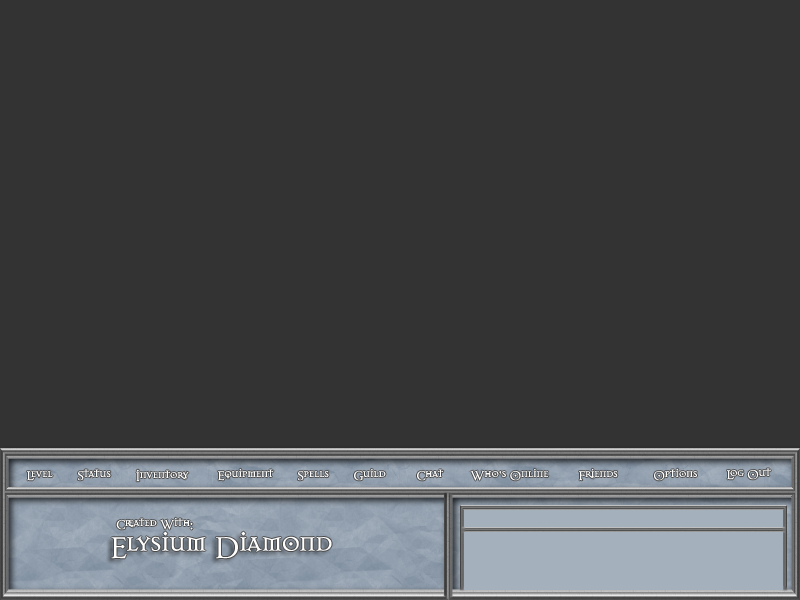
<style>
.page{position:relative;width:800px;height:600px;background:#333333}
.page>*{position:absolute;margin:0}
.t1{font:14px "Dark11";color:#ffffff}
.t2{font:33.2px "Dark11";color:#ffffff}
</style>
<div class="page">
<p class="t1" style="left:27px;top:470px;width:26px;height:11px">Level</p>
<p class="t1" style="left:78px;top:469px;width:33px;height:12px">Status</p>
<p class="t1" style="left:136px;top:469px;width:53px;height:13px">Inventory</p>
<p class="t1" style="left:218px;top:468px;width:56px;height:13px">Equipment</p>
<p class="t1" style="left:298px;top:471px;width:31px;height:10px">Spells</p>
<p class="t1" style="left:354px;top:468px;width:32px;height:13px">Guild</p>
<p class="t1" style="left:417px;top:469px;width:27px;height:12px">Chat</p>
<p class="t1" style="left:470px;top:468px;width:79px;height:13px">Who’s Online</p>
<p class="t1" style="left:579px;top:468px;width:39px;height:13px">Friends</p>
<p class="t1" style="left:654px;top:468px;width:43px;height:13px">Options</p>
<p class="t1" style="left:727px;top:468px;width:44px;height:12px">Log Out</p>
<p class="t1" style="left:116px;top:517px;width:77px;height:13px">Created With:</p>
<p class="t2" style="left:111px;top:531px;width:221px;height:28px">Elysium Diamond</p>
</div>
